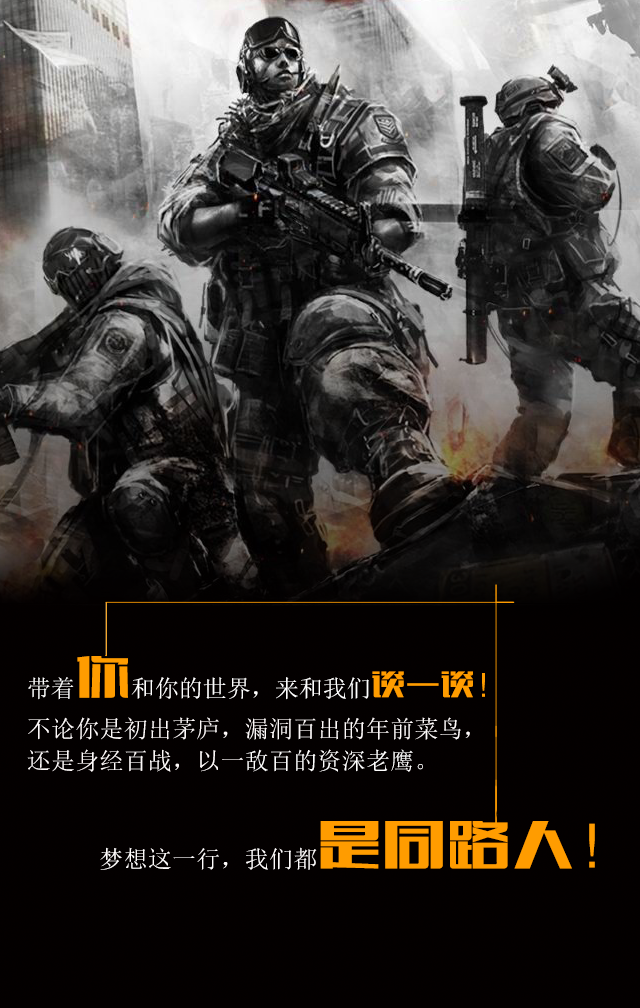
<style>
.page{position:relative;width:640px;height:1008px}
.page>*{position:absolute;margin:0}
.t1{font:24px/32px "SimSun";letter-spacing:0.01em;color:#fefafa}
.t2{font:24px/44px "SimSun";color:#ffffff}
.t3{font:56px/44px "FZCTHJW--GB1-0";color:#ff9c00}
.t4{font:34.7px/44px "FZCTHJW--GB1-0";color:#ff9c00}
.t5{font:24px/64px "SimSun";letter-spacing:0.01em;color:#fefafa}
.t6{font:24px/64px "SimSun";letter-spacing:0.01em;color:#fefefe}
.t7{font:24px "SimSun";letter-spacing:0.01em;color:#fefcfc}
.t8{font:64px "FZCTHJW--GB1-0";letter-spacing:0.01em;color:#ff9c00}
</style>
<div class="page">
<p class="t1" style="left:27px;top:656px;width:568px;height:214px"><span class="t2">带着</span><span class="t3">你</span><span class="t2">和你的世界，来和我们</span><span class="t4">谈一谈！<br><br></span>不论你是初出茅庐，漏洞百出的年前菜鸟，<br><span class="t5">还是身经百战，以一</span><span class="t6">敌百的资深老鹰。<br></span><span class="t7">梦想这一行，我们都</span><span class="t8">是同路人！</span></p>
</div>
